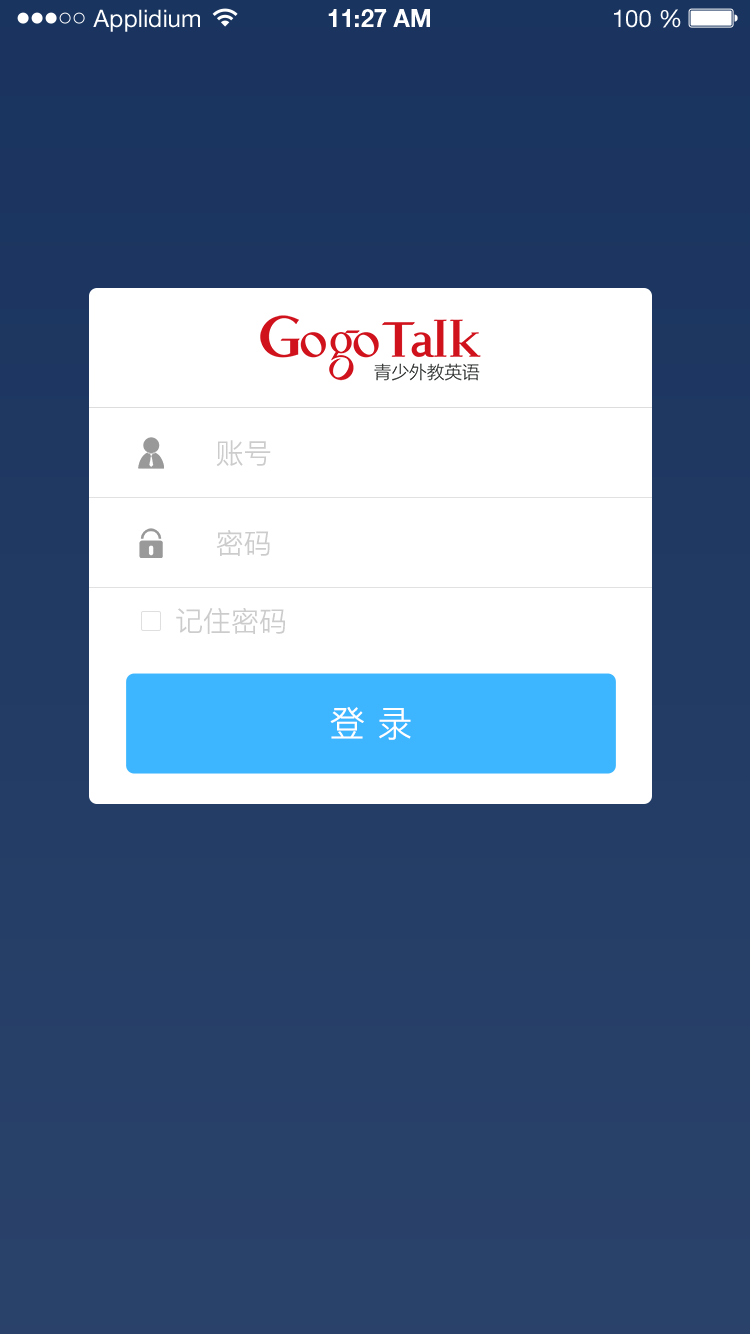
<style>
.page{position:relative;width:750px;height:1334px;background:#ffffff}
.page>*{position:absolute;margin:0}
.t1{font:24px "HelveticaNeueLTStd-Roman";color:#ffffff}
.t2{font:24px "HelveticaNeueLTStd-Bd";color:#ffffff}
.t3{font:28px "PingFang-SC-Regular";color:#cccccc}
.t4{font:36px "PingFang-SC-Regular";color:#ffffff}
</style>
<div class="page">
<p class="t1" style="left:93px;top:9px;width:107px;height:23px">Applidium</p>
<p class="t2" style="left:328px;top:9px;width:102px;height:18px">11:27 AM</p>
<p class="t1" style="left:614px;top:9px;width:67px;height:19px">100 %</p>
<p class="t3" style="left:216px;top:440px;width:55px;height:26px">账号</p>
<p class="t3" style="left:216px;top:530px;width:54px;height:26px">密码</p>
<p class="t3" style="left:176px;top:608px;width:109px;height:26px">记住密码</p>
<p class="t4" style="left:330px;top:707px;width:81px;height:33px">登 录</p>
</div>
